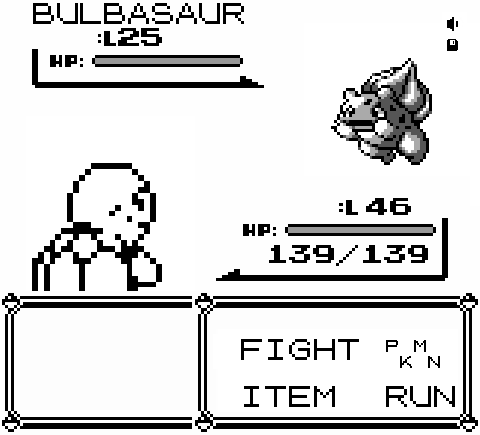
<style>
.page{position:relative;width:480px;height:435px;background:#fefefe}
.page>*{position:absolute;margin:0}
.t1{font:23.7px "PokemonGB";letter-spacing:0.005em;color:#000000;text-transform:uppercase}
.t2{font:24px "PokemonGB";letter-spacing:0.005em;color:#000000;text-transform:uppercase}
</style>
<div class="page">
<p class="t1" style="left:33px;top:3px;width:211px;height:21px">bulbasaur</p>
<p class="t1" style="left:118px;top:28px;width:44px;height:18px">25</p>
<p class="t1" style="left:366px;top:198px;width:45px;height:17px">46</p>
<p class="t1" style="left:269px;top:245px;width:65px;height:18px">139</p>
<p class="t1" style="left:363px;top:245px;width:65px;height:18px">139</p>
<p class="t2" style="left:241px;top:339px;width:214px;height:68px">FIGHT PKMN<br> <br>ITEM  RUN</p>
</div>
